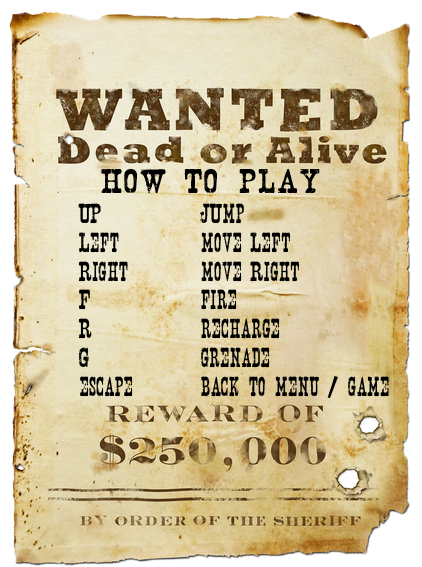
<style>
.page{position:relative;width:422px;height:567px}
.page>*{position:absolute;margin:0}
.t1{font:30px "Nashville";color:#000000;scale:1.67 1}
.t2{font:24px "Nashville";color:#000000}
.t3{font:24px "ShowcardGothic-Reg";color:#000000}
</style>
<div class="page">
<p class="t1" style="left:101px;top:169px;width:219px;height:24px">how to play</p>
<p class="t2" style="left:78px;top:203px;width:55px;height:194px">UP<br>Left<br>Right<br>F<br>R<br>G<br>escape</p>
<p class="t2" style="left:200px;top:203px;width:189px;height:195px">JUmp<br>move Left<br>move Right<br>fire<br>recharge<br>grenade<br>back to menu <span class="t3">/</span> game</p>
</div>
